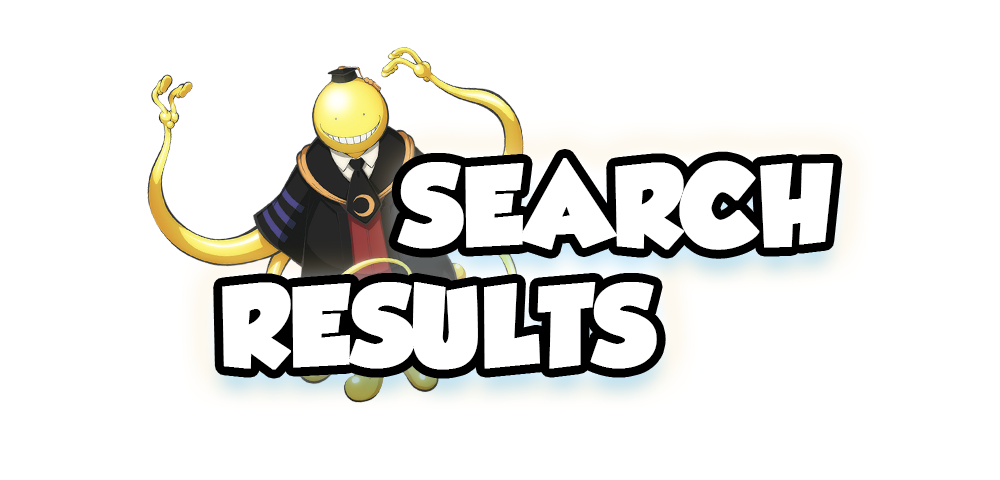
<style>
.page{position:relative;width:1000px;height:480px;background:#ffffff}
.page>*{position:absolute;margin:0}
.t1{font:100px "GROBOLD";color:#ffffff;font-weight:bold}
</style>
<div class="page">
<p class="t1" style="left:222px;top:158px;width:612px;height:212px;text-align:center">SEARCH<br>RESULTS</p>
</div>
